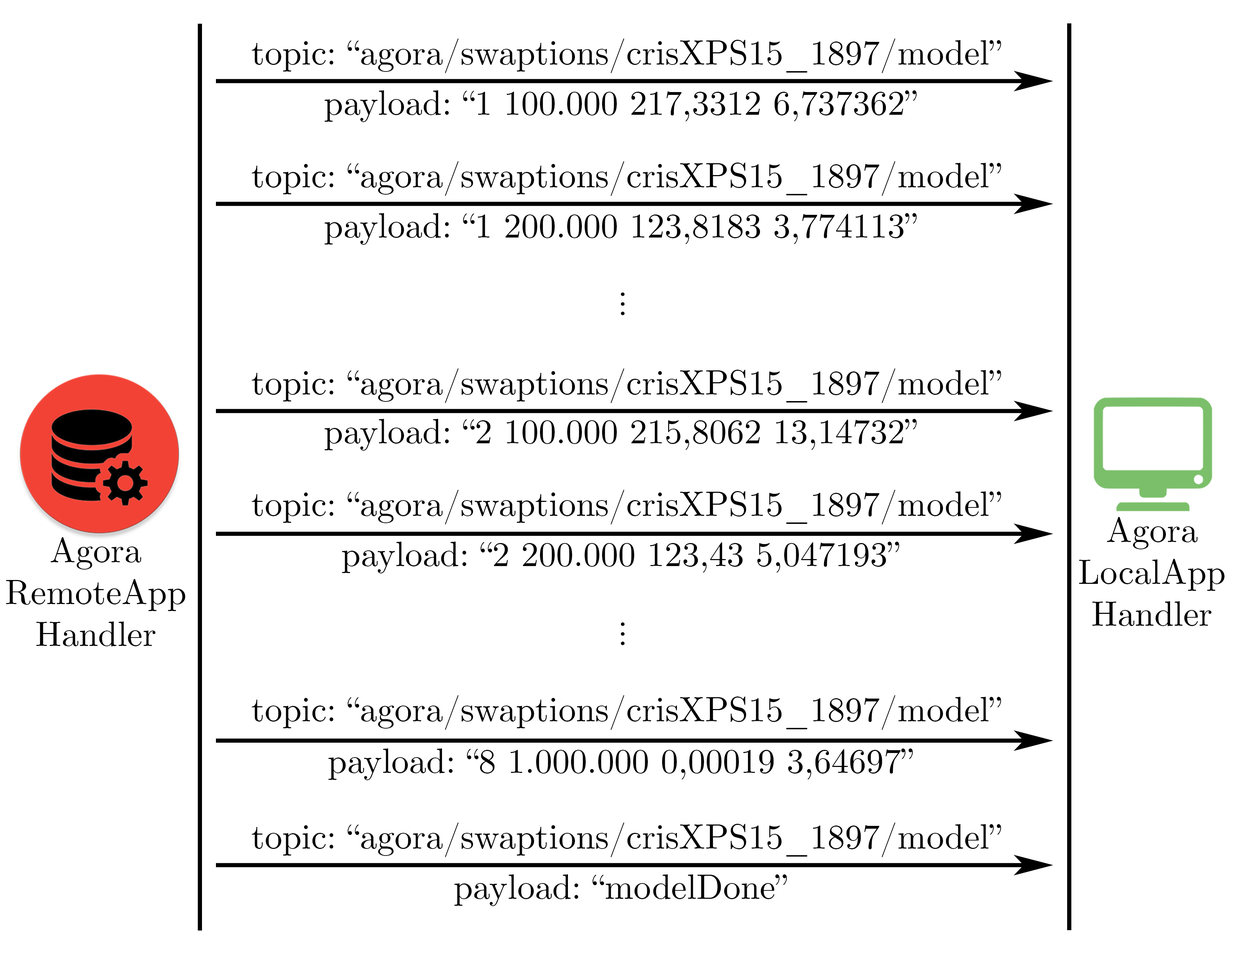
<style>
.page{position:relative;width:1236px;height:964px;background:#ffffff}
.page>*{position:absolute;margin:0}
.t1{font:34.9px "CMUSerif-Roman";color:#000000}
</style>
<div class="page">
<p class="t1" style="left:252px;top:38px;width:749px;height:35px">topic: “agora/swaptions/crisXPS15_1897/model”</p>
<p class="t1" style="left:325px;top:90px;width:592px;height:32px">payload: “1 100.000 217,3312 6,737362”</p>
<p class="t1" style="left:252px;top:161px;width:749px;height:35px">topic: “agora/swaptions/crisXPS15_1897/model”</p>
<p class="t1" style="left:325px;top:213px;width:592px;height:32px">payload: “1 200.000 123,8183 3,774113”</p>
<p class="t1" style="left:621px;top:292px;width:4px;height:23px;rotate:90deg">...</p>
<p class="t1" style="left:252px;top:368px;width:749px;height:35px">topic: “agora/swaptions/crisXPS15_1897/model”</p>
<p class="t1" style="left:325px;top:419px;width:592px;height:32px">payload: “2 100.000 215,8062 13,14732”</p>
<p class="t1" style="left:252px;top:490px;width:749px;height:35px">topic: “agora/swaptions/crisXPS15_1897/model”</p>
<p class="t1" style="left:1079px;top:517px;width:146px;height:109px;text-align:center">Agora<br>LocalApp<br>Handler</p>
<p class="t1" style="left:6px;top:537px;width:179px;height:110px;text-align:center">Agora<br>RemoteApp<br>Handler</p>
<p class="t1" style="left:342px;top:542px;width:558px;height:32px">payload: “2 200.000 123,43 5,047193”</p>
<p class="t1" style="left:621px;top:623px;width:4px;height:23px;rotate:90deg">...</p>
<p class="t1" style="left:252px;top:695px;width:749px;height:35px">topic: “agora/swaptions/crisXPS15_1897/model”</p>
<p class="t1" style="left:328px;top:749px;width:585px;height:32px">payload: “8 1.000.000 0,00019 3,64697”</p>
<p class="t1" style="left:252px;top:823px;width:749px;height:35px">topic: “agora/swaptions/crisXPS15_1897/model”</p>
<p class="t1" style="left:454px;top:875px;width:333px;height:32px">payload: “modelDone”</p>
</div>
